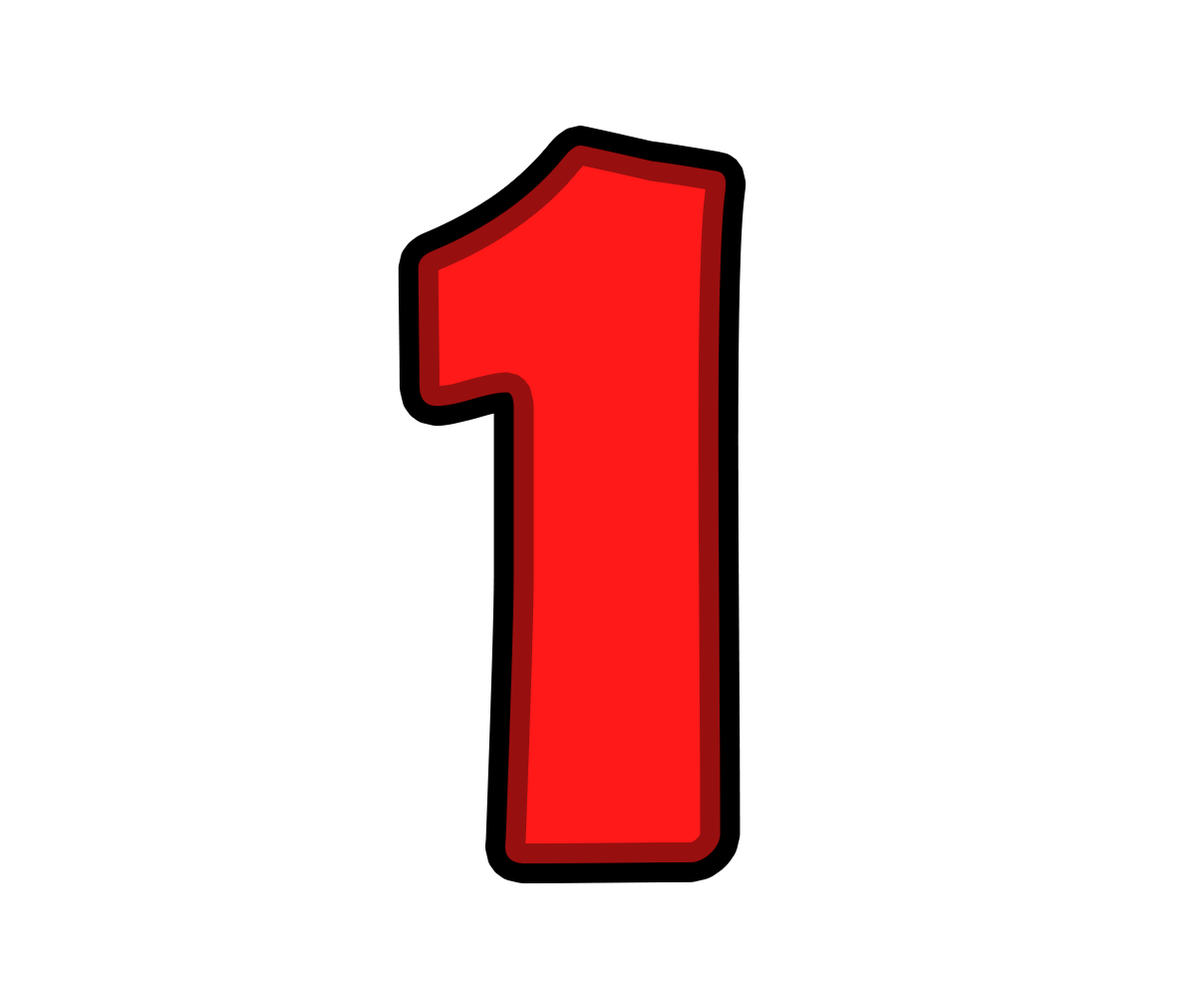
<style>
.page{position:relative;width:1196px;height:997px;background:#ffffff}
.page>*{position:absolute;margin:0}
.t1{font:1163px "BerlinSansFBDemi-Bold";color:#ff1919}
</style>
<div class="page">
<p class="t1" style="left:418px;top:146px;width:309px;height:717px">1</p>
</div>
